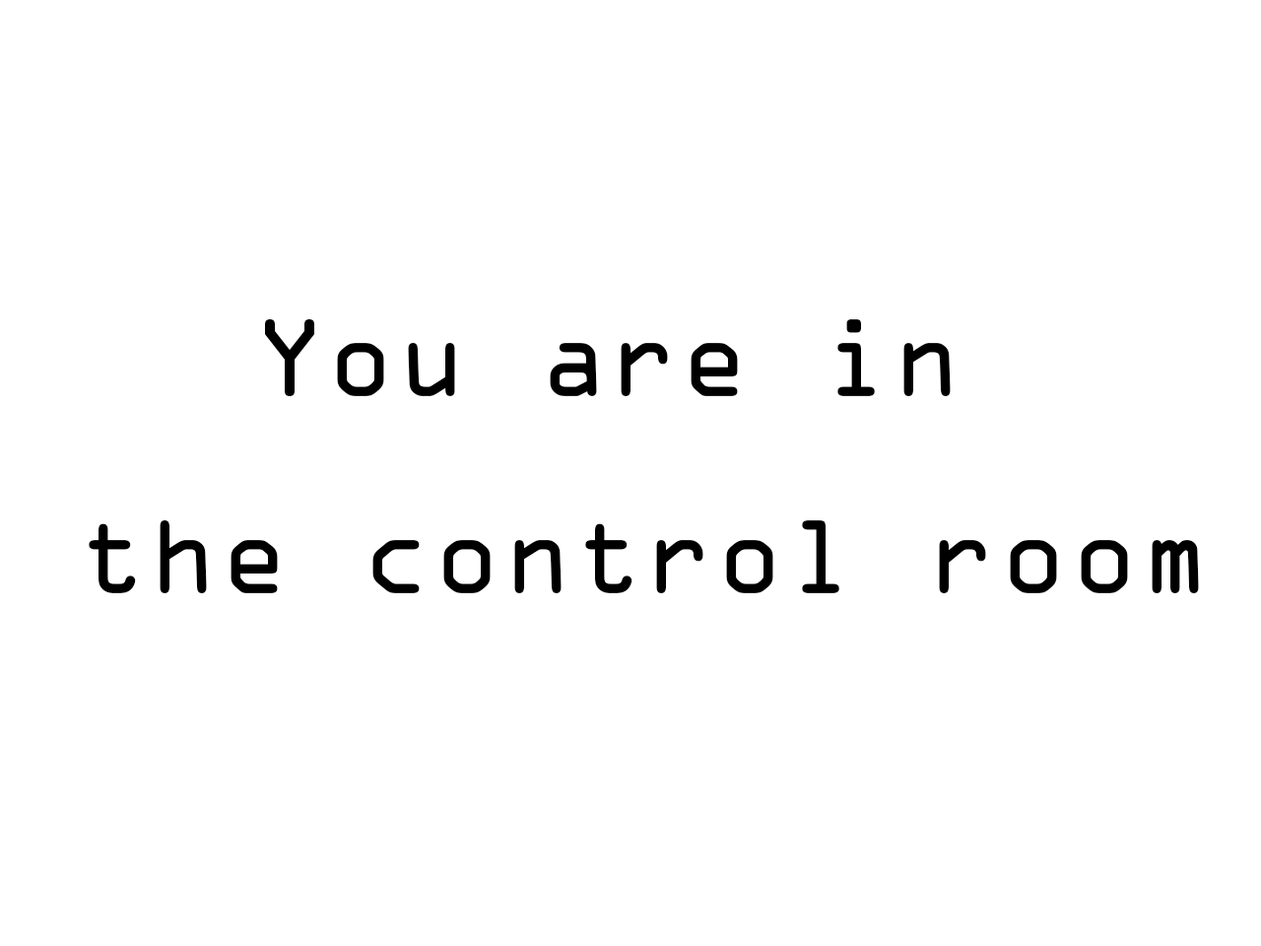
<style>
.page{position:relative;width:1261px;height:946px;background:#ffffff}
.page>*{position:absolute;margin:0}
.t1{font:98.6px/197.1px "OCRAStd";color:#000000}
</style>
<div class="page">
<p class="t1" style="left:89px;top:319px;width:1110px;height:274px;text-align:center">You are in <br>the control room</p>
</div>
